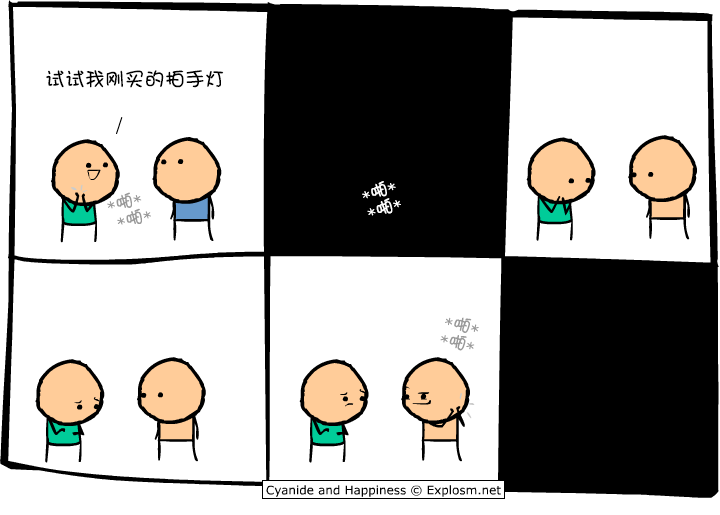
<style>
.page{position:relative;width:720px;height:515px;background:#ffffff}
.page>*{position:absolute;margin:0}
.t1{font:20px "DFGirl";color:#000000}
.t2{font:18px/18px "DFGirl";color:#ffffff}
.t3{font:18px/18px "DFGirl";color:#999999}
</style>
<div class="page">
<p class="t1" style="left:46px;top:70px;width:178px;height:18px">试试我刚买的拍手灯</p>
<p class="t2" style="left:362px;top:181px;width:39px;height:35px;rotate:-18deg">*啪* <br>*啪*</p>
<p class="t3" style="left:107px;top:192px;width:44px;height:33px;rotate:-13deg">*啪*<br> *啪*</p>
<p class="t3" style="left:440px;top:317px;width:39px;height:34px;rotate:15deg">*啪* <br>*啪*</p>
</div>
